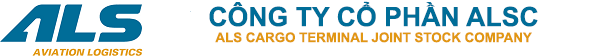
<style>
.page{position:relative;width:600px;height:56px;background:#ffffff}
.page>*{position:absolute;margin:0}
.t1{font:13.3px "Arial-BoldMT";color:#e19712}
.t2{font:26.7px "Arial-BoldMT";color:#006d98}
</style>
<div class="page">
<p class="t1" style="left:209px;top:1px;width:329px;height:42px;text-align:center"><span class="t2">CÔNG TY CỔ PHẦN ALSC<br></span>ALS CARGO TERMINAL JOINT STOCK COMPANY</p>
</div>
